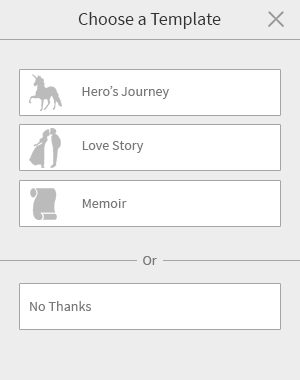
<style>
.page{position:relative;width:300px;height:380px;background:#ededed}
.page>*{position:absolute;margin:0}
.t1{font:18.2px "SourceSansPro-Regular";color:#333333}
.t2{font:14px "SourceSansPro-Regular";color:#777777}
</style>
<div class="page">
<p class="t1" style="left:78px;top:12px;width:143px;height:17px">Choose a Template</p>
<p class="t2" style="left:82px;top:86px;width:87px;height:13px">Hero’s Journey</p>
<p class="t2" style="left:82px;top:141px;width:62px;height:12px">Love Story</p>
<p class="t2" style="left:82px;top:199px;width:45px;height:9px">Memoir</p>
<p class="t2" style="left:30px;top:301px;width:61px;height:10px">No Thanks</p>
</div>
